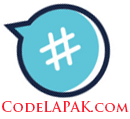
<style>
.page{position:relative;width:130px;height:119px;background:#ffffff}
.page>*{position:absolute;margin:0}
.t1{font:14px "TrajanPro-Bold";color:#f8192e}
</style>
<div class="page">
<p class="t1" style="left:2px;top:101px;width:127px;height:11px">CodeLAPAK.com</p>
</div>
